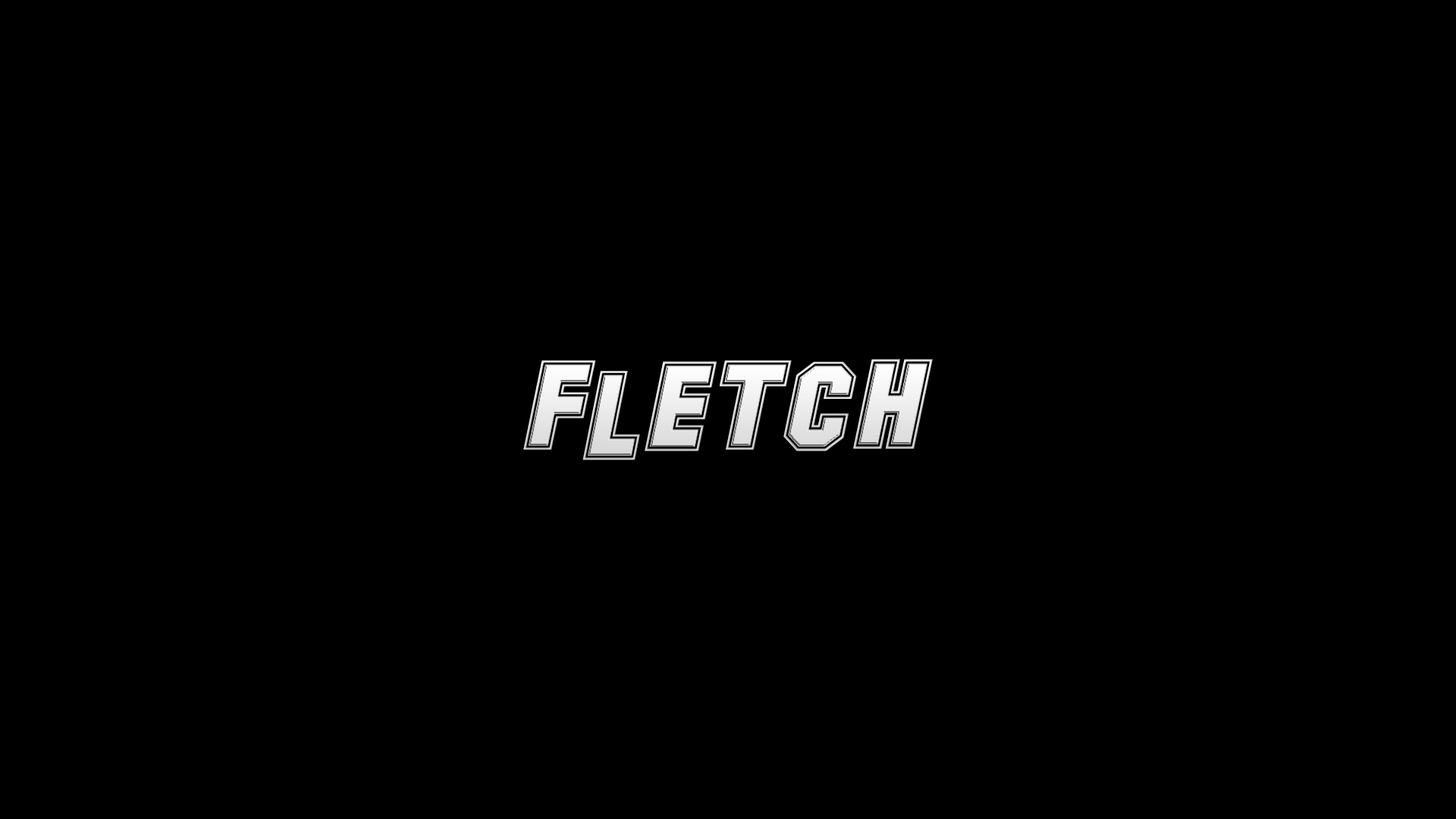
<style>
.page{position:relative;width:1456px;height:819px;background:#000000}
.page>*{position:absolute;margin:0}
.t1{font:127.4px "Collegerion";letter-spacing:0.08em;color:#e8e8e8}
</style>
<div class="page">
<p class="t1" style="left:523px;top:359px;width:410px;height:101px">Fletch</p>
</div>
